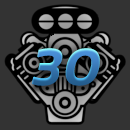
<style>
.page{position:relative;width:130px;height:130px;background:#333333}
.page>*{position:absolute;margin:0}
.t1{font:50.5px "Sansation-Bold-Italic";letter-spacing:0.05em;font-weight:bold}
</style>
<div class="page">
<p class="t1" style="left:31px;top:48px;width:69px;height:38px">30</p>
</div>
